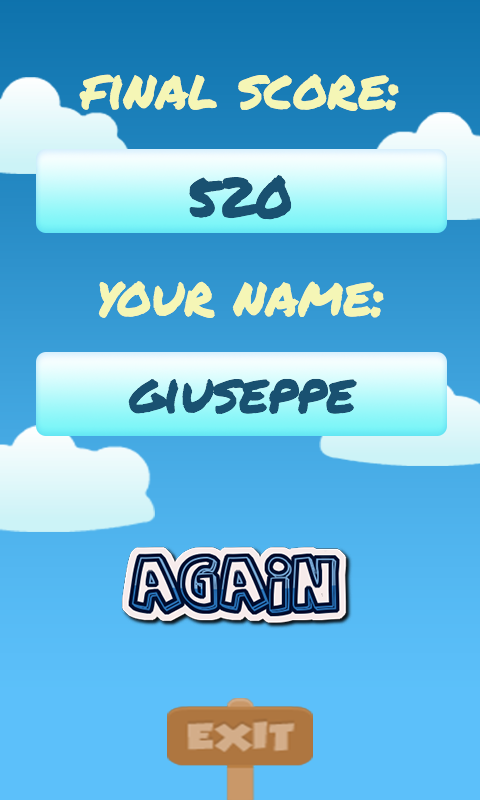
<style>
.page{position:relative;width:480px;height:800px}
.page>*{position:absolute;margin:0}
.t1{font:55.6px "PermanentMarker";color:#f5f6b6}
.t2{font:55.6px "PermanentMarker";color:#195171}
</style>
<div class="page">
<p class="t1" style="left:79px;top:74px;width:320px;height:37px">final score:</p>
<p class="t2" style="left:189px;top:175px;width:103px;height:45px">520</p>
<p class="t1" style="left:98px;top:281px;width:286px;height:37px">your name:</p>
<p class="t2" style="left:128px;top:378px;width:229px;height:36px">giuseppe</p>
</div>
